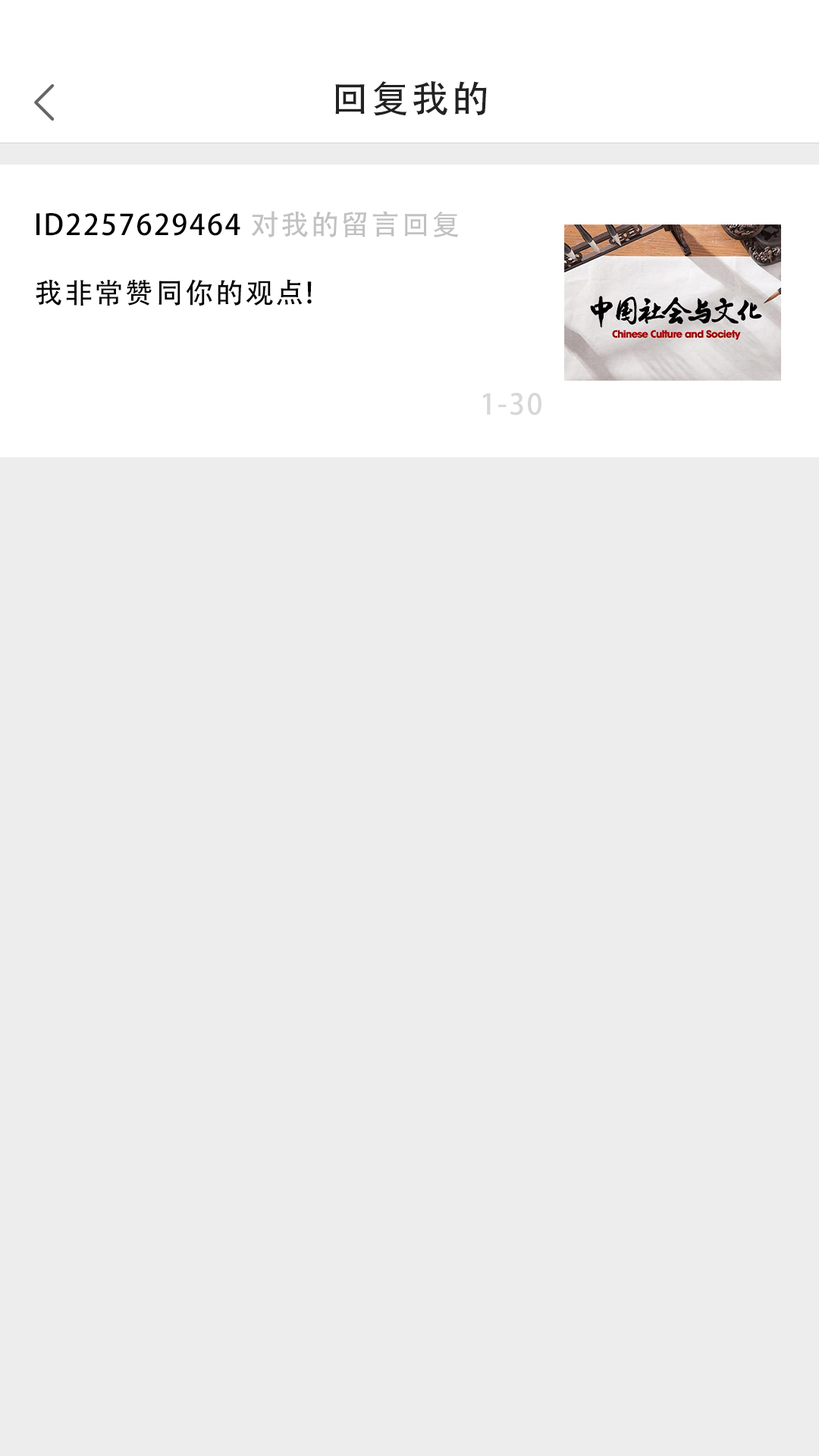
<style>
.page{position:relative;width:819px;height:1456px;background:#eeeded}
.page>*{position:absolute;margin:0}
.t1{font:37.9px "AdobeHeitiStd-Regular";letter-spacing:0.06em;color:#222222}
.t2{font:28.4px "AdobeHeitiStd-Regular";letter-spacing:0.06em;color:#010101}
.t3{font:28.4px "AdobeHeitiStd-Regular";letter-spacing:0.06em;color:#c2c1c1}
.t4{font:28.4px "AdobeHeitiStd-Regular";letter-spacing:0.06em;color:#050505}
.t5{font:28.4px "AdobeHeitiStd-Regular";letter-spacing:0.06em;color:#d8d6d6}
</style>
<div class="page">
<p class="t1" style="left:335px;top:80px;width:152px;height:36px">回复我的</p>
<p class="t2" style="left:36px;top:211px;width:423px;height:26px">ID2257629464 <span class="t3">对我的留言回复</span></p>
<p class="t4" style="left:36px;top:279px;width:276px;height:27px">我非常赞同你的观点!</p>
<p class="t5" style="left:482px;top:393px;width:59px;height:23px">1-30</p>
</div>
